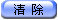
<style>
.page{position:relative;width:58px;height:20px}
.page>*{position:absolute;margin:0}
.t1{font:12px "SimSun";color:#000000}
</style>
<div class="page">
<p class="t1" style="left:14px;top:4px;width:29px;height:11px">清 除</p>
</div>
